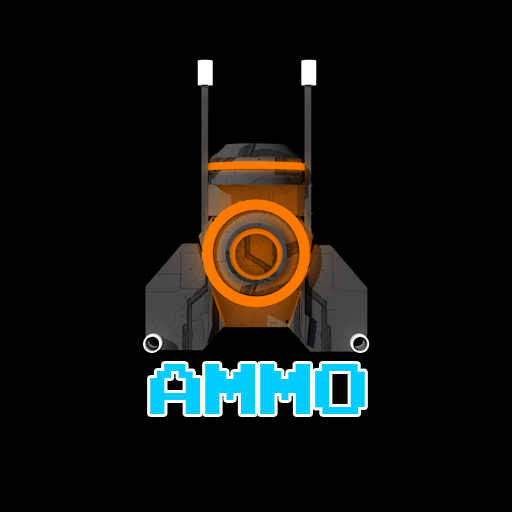
<style>
.page{position:relative;width:512px;height:512px;background:#000000}
.page>*{position:absolute;margin:0}
.t1{font:100px "ArcadeClassic";color:#00ccff}
</style>
<div class="page">
<p class="t1" style="left:150px;top:364px;width:215px;height:50px">Ammo</p>
</div>
